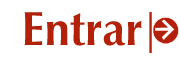
<style>
.page{position:relative;width:180px;height:59px;background:#ffffff}
.page>*{position:absolute;margin:0}
.t1{font:48px "ZapfHumanist601BT-Bold";color:#b2220a;scale:0.95 1}
</style>
<div class="page">
<p class="t1" style="left:24px;top:12px;width:118px;height:34px">Entrar</p>
</div>
